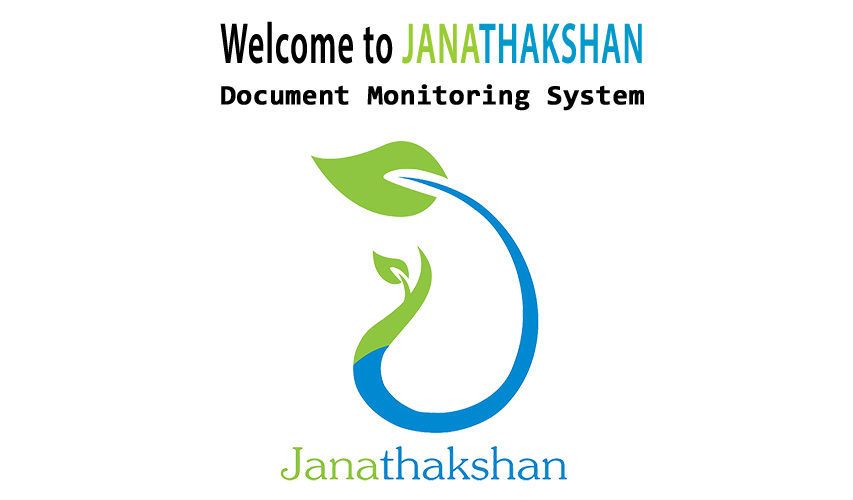
<style>
.page{position:relative;width:853px;height:500px;background:#ffffff}
.page>*{position:absolute;margin:0}
.t1{font:57.5px "MyriadPro-Semibold";letter-spacing:0.04em;color:#000000;scale:0.55 1}
.t2{font:57.5px "MyriadPro-Semibold";letter-spacing:0.04em;color:#99cc33;scale:0.55 1}
.t3{font:57.5px "MyriadPro-Semibold";letter-spacing:0.04em;color:#0099cc;scale:0.55 1}
.t4{font:27.8px "Consolas-Bold";color:#000000;font-weight:bold}
</style>
<div class="page">
<p class="t1" style="left:220px;top:21px;width:422px;height:43px">Welcome to <span class="t2">JANA</span><span class="t3">THAKSHAN</span></p>
<p class="t4" style="left:221px;top:84px;width:423px;height:27px">Document Monitoring System</p>
</div>
